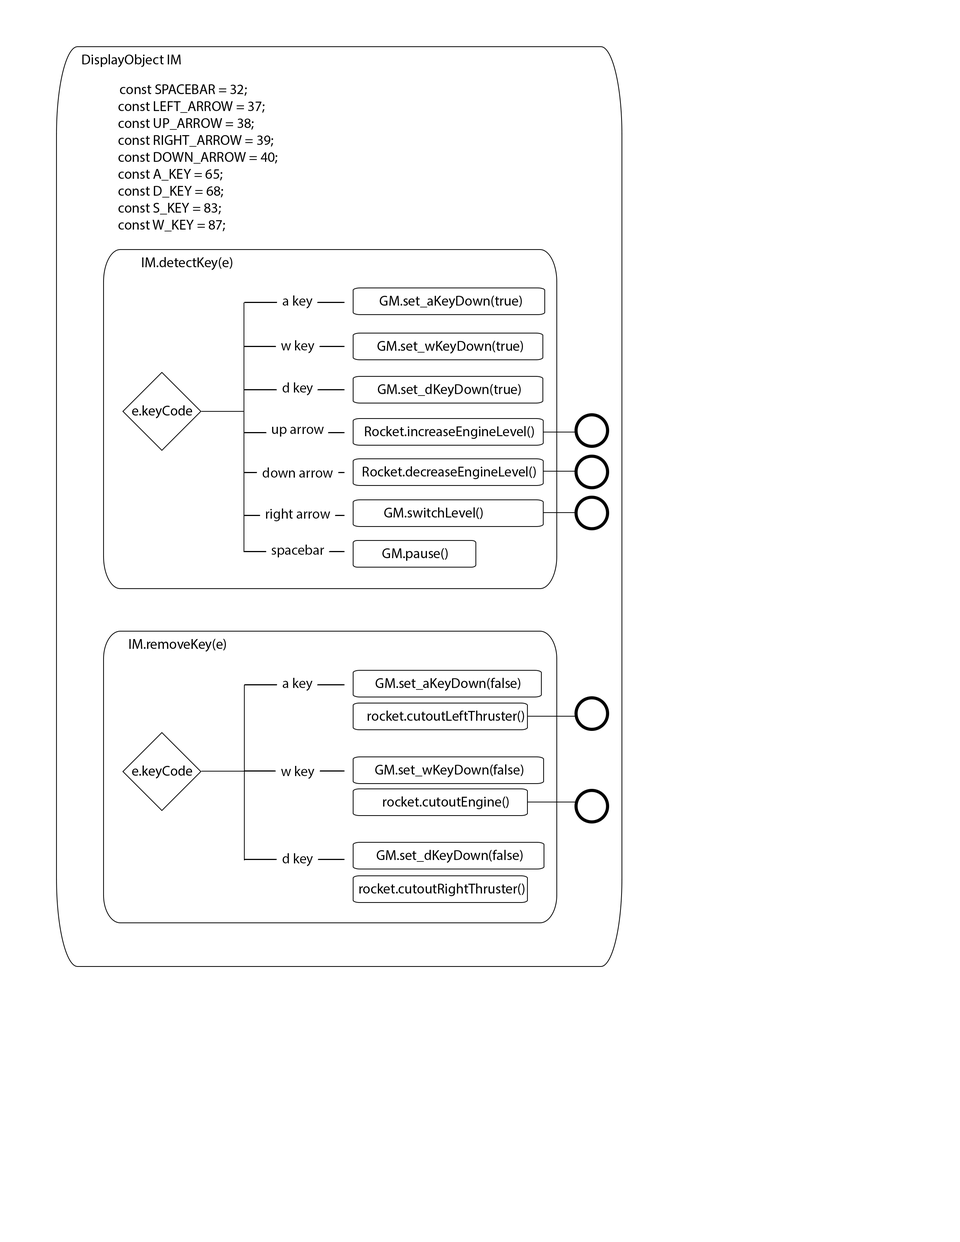
<style>
.page{position:relative;width:960px;height:1242px;background:#ffffff}
.page>*{position:absolute;margin:0}
.t1{font:14.1px "MyriadPro-Regular";color:#000000}
</style>
<div class="page">
<p class="t1" style="left:82px;top:54px;width:99px;height:13px">DisplayObject IM</p>
<p class="t1" style="left:118px;top:84px;width:159px;height:148px">const SPACEBAR = 32;<br>    const LEFT_ARROW = 37;<br>    const UP_ARROW = 38;<br>    const RIGHT_ARROW = 39;<br>    const DOWN_ARROW = 40;<br>    const A_KEY = 65;<br>    const D_KEY = 68;<br>    const S_KEY = 83;<br>    const W_KEY = 87;</p>
<p class="t1" style="left:142px;top:257px;width:90px;height:13px">IM.detectKey(e)</p>
<p class="t1" style="left:283px;top:296px;width:29px;height:13px">a key</p>
<p class="t1" style="left:379px;top:296px;width:143px;height:13px">GM.set_aKeyDown(true)</p>
<p class="t1" style="left:281px;top:340px;width:33px;height:13px">w key</p>
<p class="t1" style="left:377px;top:341px;width:146px;height:13px">GM.set_wKeyDown(true)</p>
<p class="t1" style="left:282px;top:382px;width:31px;height:14px">d key</p>
<p class="t1" style="left:378px;top:384px;width:143px;height:13px">GM.set_dKeyDown(true)</p>
<p class="t1" style="left:132px;top:405px;width:60px;height:14px">e.keyCode</p>
<p class="t1" style="left:272px;top:427px;width:52px;height:10px">up arrow</p>
<p class="t1" style="left:365px;top:426px;width:169px;height:13px">Rocket.increaseEngineLevel()</p>
<p class="t1" style="left:262px;top:468px;width:71px;height:10px">down arrow</p>
<p class="t1" style="left:363px;top:466px;width:173px;height:13px">Rocket.decreaseEngineLevel()</p>
<p class="t1" style="left:266px;top:509px;width:64px;height:12px">right arrow</p>
<p class="t1" style="left:384px;top:507px;width:99px;height:12px">GM.switchLevel()</p>
<p class="t1" style="left:271px;top:545px;width:53px;height:13px">spacebar</p>
<p class="t1" style="left:382px;top:548px;width:66px;height:13px">GM.pause()</p>
<p class="t1" style="left:129px;top:639px;width:97px;height:13px">IM.removeKey(e)</p>
<p class="t1" style="left:283px;top:678px;width:29px;height:13px">a key</p>
<p class="t1" style="left:375px;top:678px;width:145px;height:13px">GM.set_aKeyDown(false)</p>
<p class="t1" style="left:367px;top:711px;width:157px;height:11px">rocket.cutoutLeftThruster()</p>
<p class="t1" style="left:132px;top:766px;width:60px;height:13px">e.keyCode</p>
<p class="t1" style="left:281px;top:766px;width:33px;height:13px">w key</p>
<p class="t1" style="left:375px;top:765px;width:148px;height:13px">GM.set_wKeyDown(false)</p>
<p class="t1" style="left:383px;top:797px;width:126px;height:12px">rocket.cutoutEngine()</p>
<p class="t1" style="left:282px;top:853px;width:31px;height:14px">d key</p>
<p class="t1" style="left:376px;top:850px;width:146px;height:13px">GM.set_dKeyDown(false)</p>
<p class="t1" style="left:359px;top:883px;width:165px;height:13px">rocket.cutoutRightThruster()</p>
</div>
